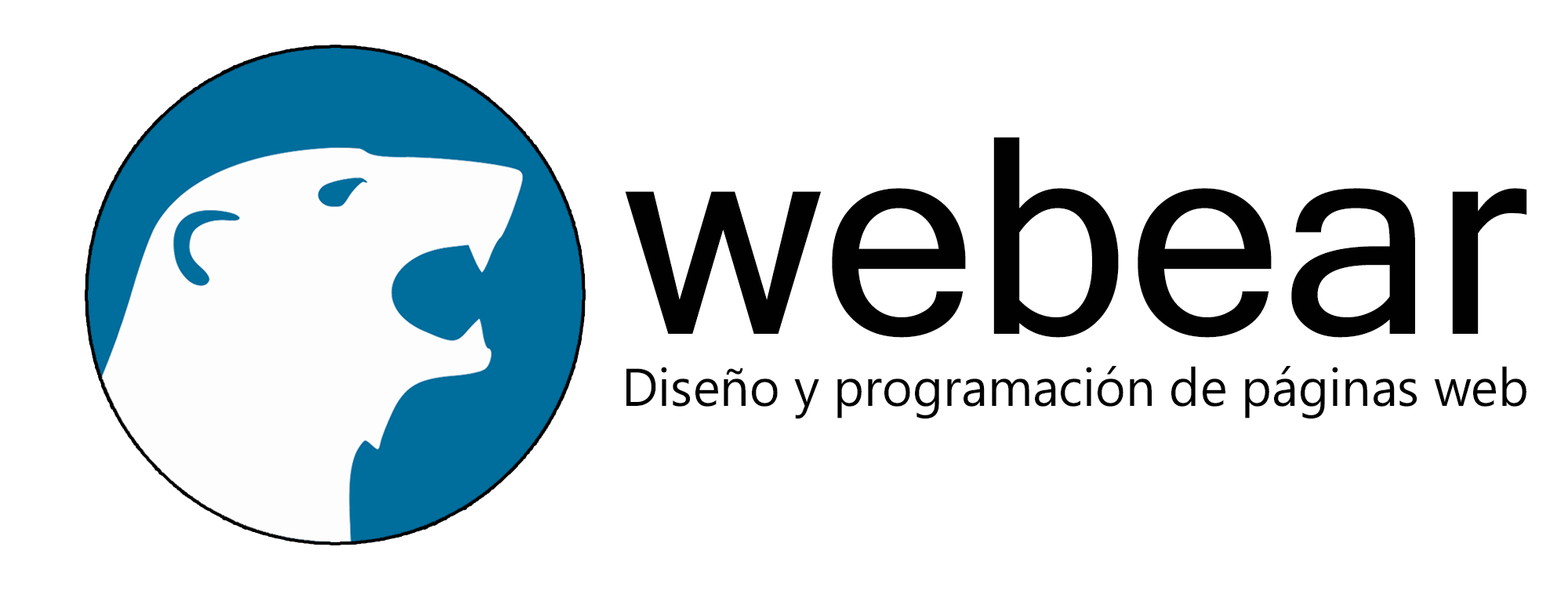
<style>
.page{position:relative;width:1568px;height:601px;background:#ffffff}
.page>*{position:absolute;margin:0}
.t1{font:274.6px "MicrosoftSansSerif";color:#010101}
.t2{font:53.1px "MicrosoftNewTaiLue";color:#000000}
</style>
<div class="page">
<p class="t1" style="left:625px;top:137px;width:902px;height:201px">webear</p>
<p class="t2" style="left:626px;top:366px;width:900px;height:53px">Diseño y programación de páginas web</p>
</div>
